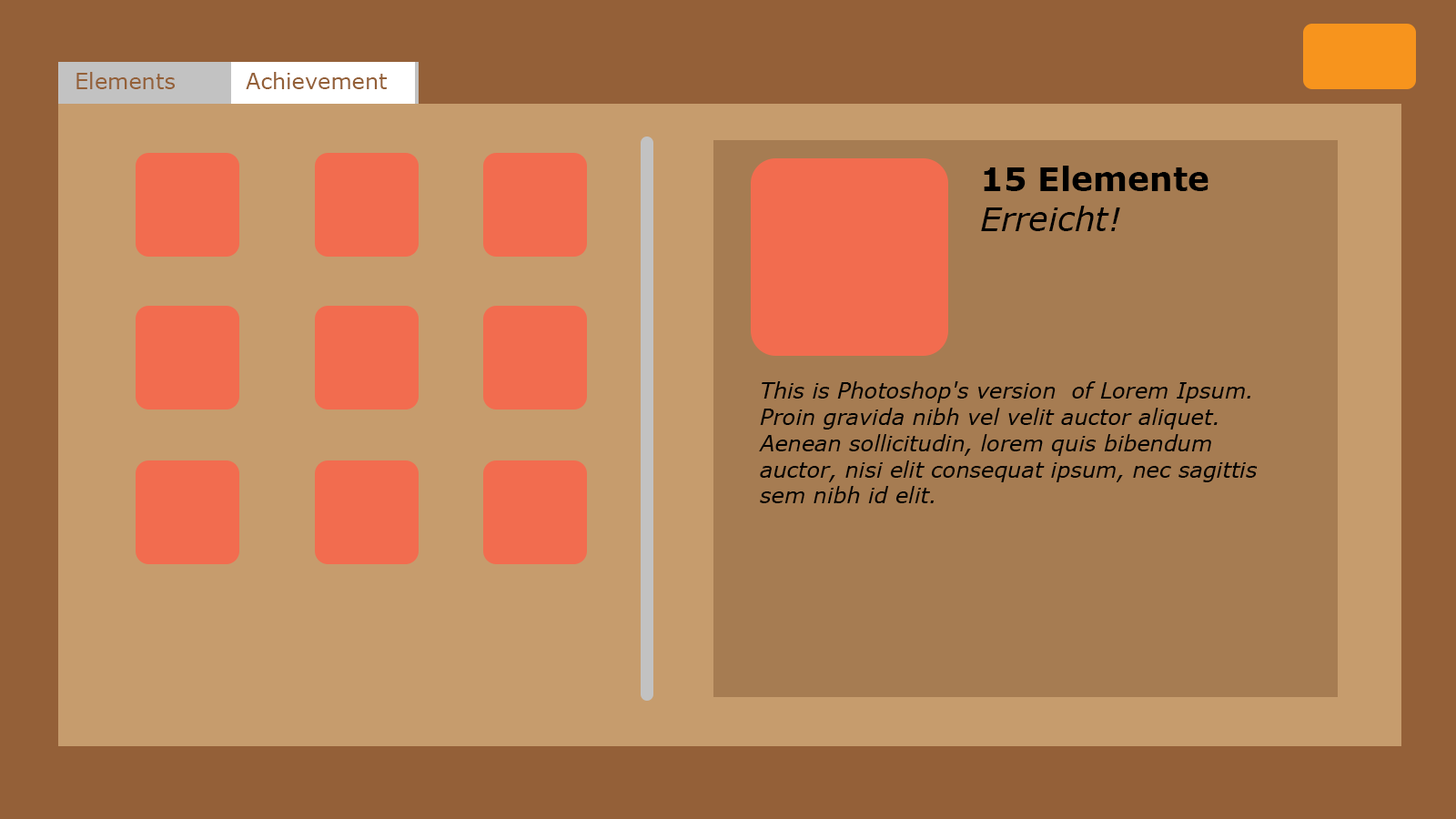
<style>
.page{position:relative;width:1456px;height:819px;background:#c69c6d}
.page>*{position:absolute;margin:0}
.t1{font:21.8px "Verdana";color:#946038}
.t2{font:32.8px "Verdana-Bold";color:#000000}
.t3{font:32.8px "Verdana-Italic";color:#000000}
.t4{font:21.8px "Verdana-Italic";color:#000000}
</style>
<div class="page">
<p class="t1" style="left:76px;top:72px;width:99px;height:17px">Elements</p>
<p class="t1" style="left:246px;top:72px;width:141px;height:17px">Achievement</p>
<p class="t2" style="left:981px;top:166px;width:227px;height:65px">15 Elemente<br><span class="t3">Erreicht!</span></p>
<p class="t4" style="left:759px;top:381px;width:499px;height:122px">This is Photoshop's version  of Lorem Ipsum. Proin gravida nibh vel velit auctor aliquet. Aenean sollicitudin, lorem quis bibendum auctor, nisi elit consequat ipsum, nec sagittis sem nibh id elit.</p>
</div>
